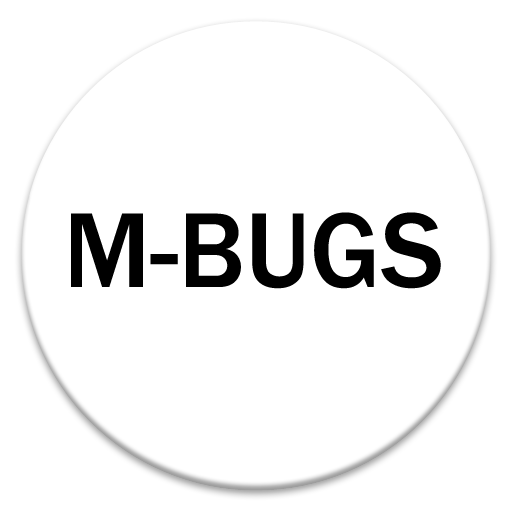
<style>
.page{position:relative;width:512px;height:512px;background:#ffffff}
.page>*{position:absolute;margin:0}
.t1{font:110px "FranklinGothic-Medium";color:#000000}
</style>
<div class="page">
<p class="t1" style="left:71px;top:212px;width:370px;height:77px">M-BUGS</p>
</div>
